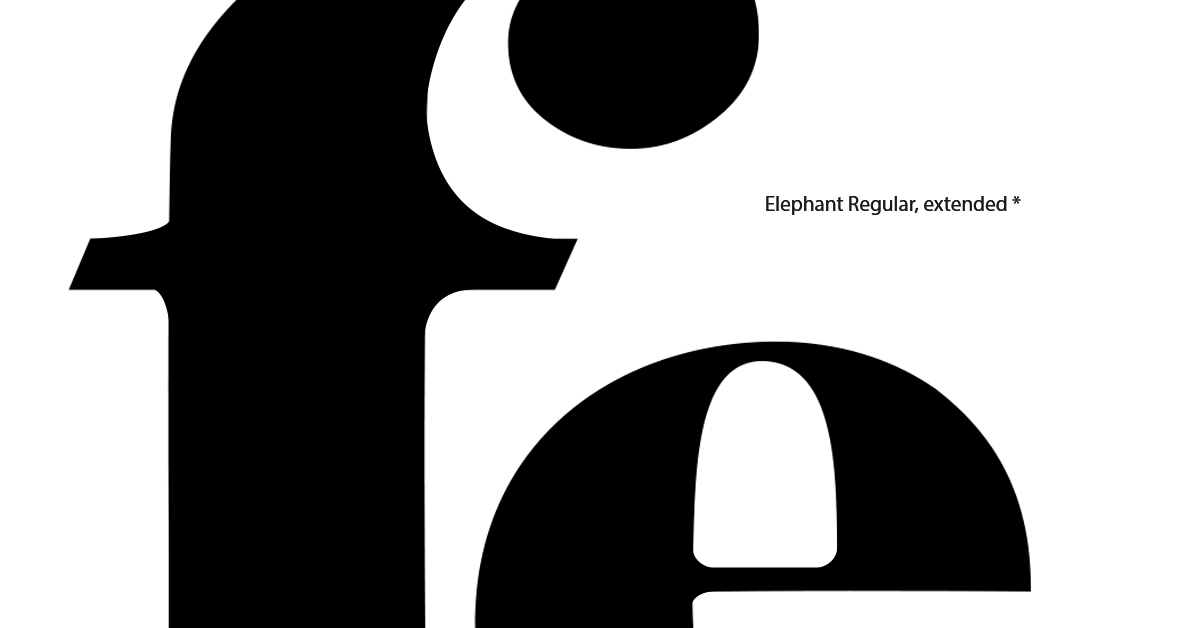
<style>
.page{position:relative;width:1200px;height:628px;background:#ffffff}
.page>*{position:absolute;margin:0}
.t1{font:21.2px "MyriadPro-Regular";color:#1a1a1a}
</style>
<div class="page">
<p class="t1" style="left:766px;top:196px;width:255px;height:19px">Elephant Regular, extended *</p>
</div>
